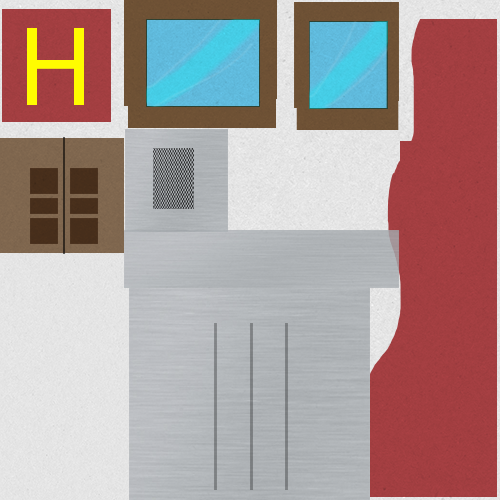
<style>
.page{position:relative;width:500px;height:500px}
.page>*{position:absolute;margin:0}
.t1{font:114.4px "MyriadPro-Regular";color:#fffc00}
</style>
<div class="page">
<p class="t1" style="left:27px;top:28px;width:57px;height:77px">H</p>
</div>
